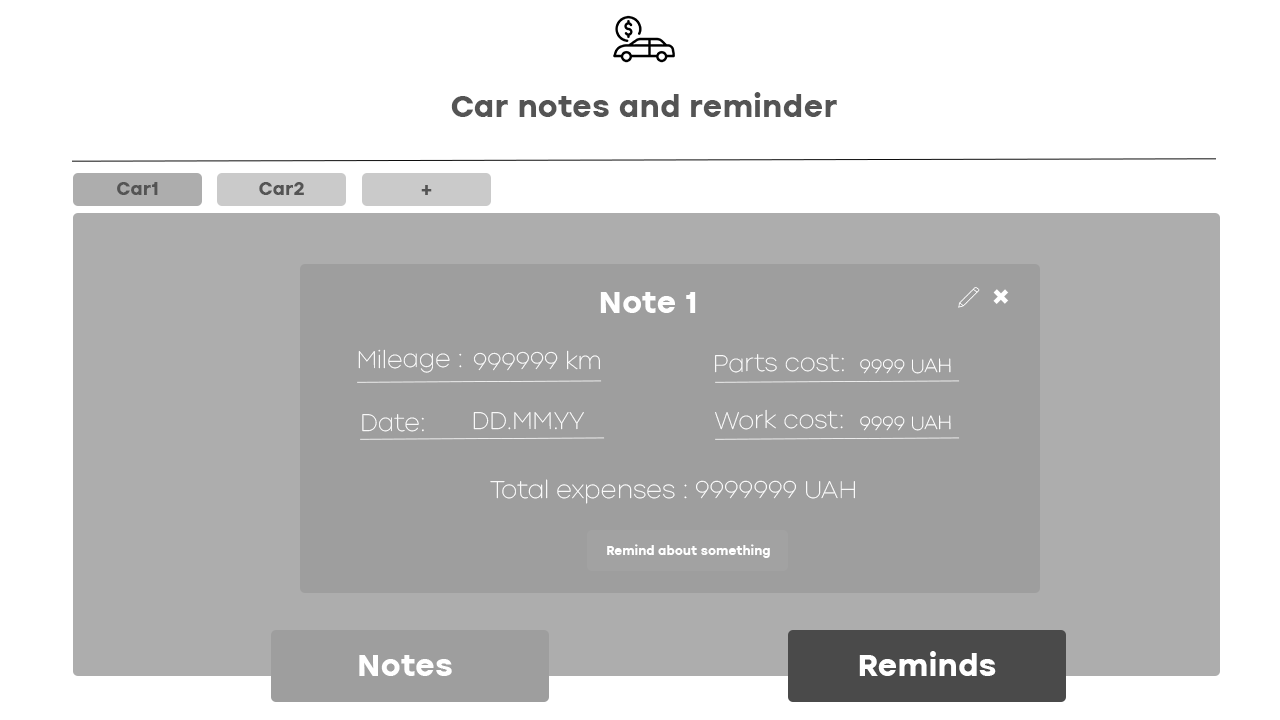
<style>
.page{position:relative;width:1280px;height:720px;background:#ffffff}
.page>*{position:absolute;margin:0}
.t1{font:30px "ICTV-Bold";color:#545454}
.t2{font:18px "ICTV-Bold";color:#545454}
.t3{font:30px "ICTV-Bold";color:#ffffff}
.t4{font:23.7px "ICTV-Thin";color:#ffffff}
.t5{font:18.9px "ICTV-Thin";color:#ffffff}
.t6{font:24px "ICTV-Thin";color:#ffffff}
.t7{font:12px "ICTV-Bold";color:#ffffff}
</style>
<div class="page">
<p class="t1" style="left:451px;top:92px;width:386px;height:25px">Car notes and reminder</p>
<p class="t2" style="left:117px;top:182px;width:41px;height:13px">Car1</p>
<p class="t2" style="left:259px;top:182px;width:45px;height:13px">Car2</p>
<p class="t2" style="left:421px;top:185px;width:11px;height:10px">+</p>
<p class="t3" style="left:600px;top:292px;width:96px;height:21px">Note 1</p>
<p class="t3" style="left:993px;top:289px;width:16px;height:15px;rotate:45deg">+</p>
<p class="t4" style="left:358px;top:349px;width:104px;height:24px">Mileage :</p>
<p class="t4" style="left:473px;top:350px;width:127px;height:21px">999999 km</p>
<p class="t4" style="left:715px;top:354px;width:129px;height:19px">Parts cost:</p>
<p class="t5" style="left:860px;top:358px;width:91px;height:16px">9999 UAH</p>
<p class="t4" style="left:362px;top:414px;width:62px;height:18px">Date:</p>
<p class="t4" style="left:473px;top:412px;width:111px;height:18px">DD.MM.YY</p>
<p class="t4" style="left:715px;top:409px;width:128px;height:21px">Work cost:</p>
<p class="t5" style="left:860px;top:415px;width:91px;height:16px">9999 UAH</p>
<p class="t6" style="left:490px;top:479px;width:365px;height:25px">Total expenses : 9999999 UAH</p>
<p class="t7" style="left:607px;top:544px;width:163px;height:14px">Remind about something</p>
<p class="t3" style="left:859px;top:651px;width:137px;height:25px">Reminds</p>
<p class="t3" style="left:359px;top:655px;width:93px;height:21px">Notes</p>
</div>
